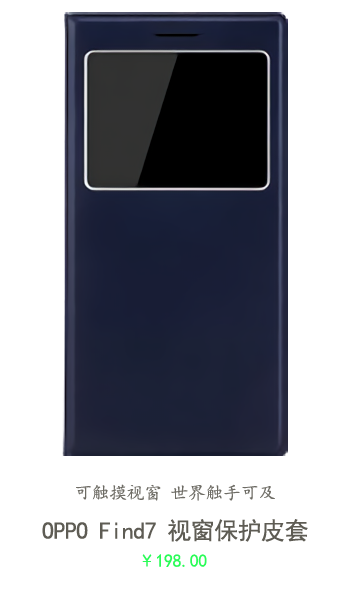
<style>
.page{position:relative;width:350px;height:600px;background:#ffffff}
.page>*{position:absolute;margin:0}
.t1{font:18px "KaiTi";letter-spacing:-0.025em;color:#5e5c54}
.t2{font:24px "SimHei";letter-spacing:-0.025em;color:#5e5c54}
.t3{font:18px "KaiTi";letter-spacing:-0.025em;color:#14fc46}
</style>
<div class="page">
<p class="t1" style="left:76px;top:484px;width:199px;height:17px;opacity:0.9">可触摸视窗 世界触手可及</p>
<p class="t2" style="left:42px;top:519px;width:266px;height:23px">OPPO Find7 视窗保护皮套</p>
<p class="t3" style="left:142px;top:554px;width:65px;height:13px;opacity:0.91">￥198.00</p>
</div>
